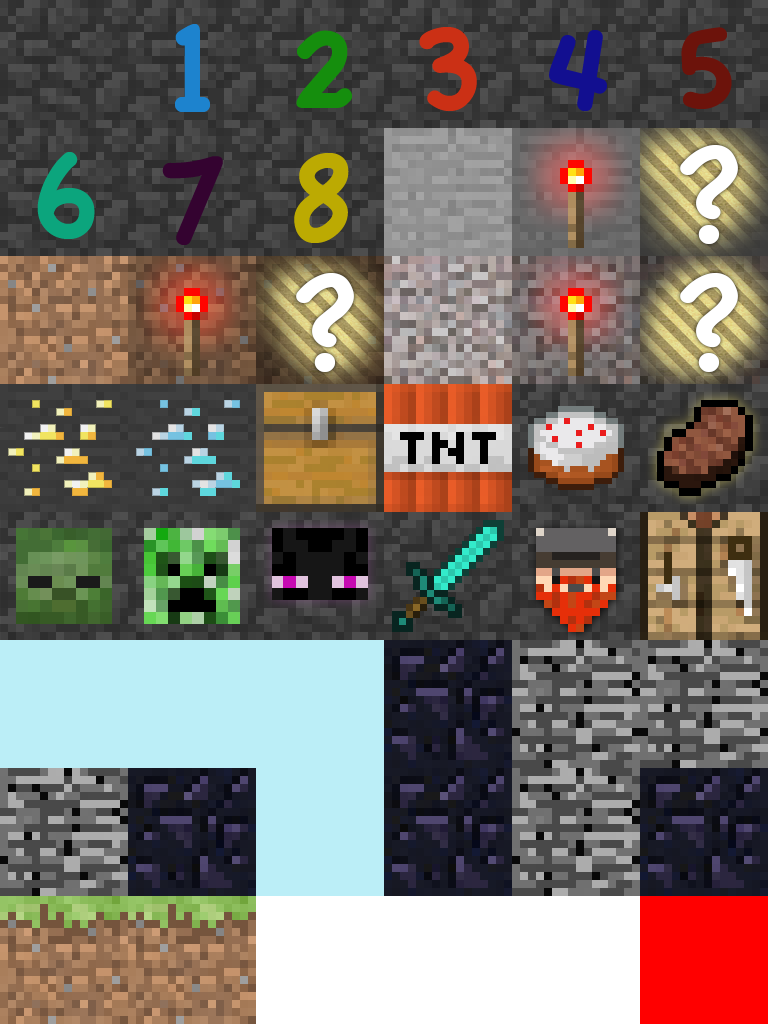
<style>
.page{position:relative;width:768px;height:1024px}
.page>*{position:absolute;margin:0}
.t1{font:130px "AppleCasual";color:#1d83ce}
.t2{font:130px "AppleCasual";color:#158e0d}
.t3{font:130px "AppleCasual";color:#cb3015}
.t4{font:130px "AppleCasual";color:#120f90}
.t5{font:130px "AppleCasual";color:#6c130b}
.t6{font:144px "ChalkboardSE-Regular";color:#ffffff}
.t7{font:130px "AppleCasual";color:#0ca57d}
.t8{font:130px "AppleCasual";color:#340330}
.t9{font:130px "AppleCasual";color:#bcaa02}
</style>
<div class="page">
<p class="t1" style="left:175px;top:24px;width:35px;height:88px">1</p>
<p class="t2" style="left:296px;top:30px;width:56px;height:78px">2</p>
<p class="t3" style="left:419px;top:27px;width:58px;height:84px">3</p>
<p class="t4" style="left:549px;top:30px;width:58px;height:81px">4</p>
<p class="t5" style="left:681px;top:27px;width:51px;height:82px">5</p>
<p class="t6" style="left:680px;top:145px;width:58px;height:99px">?</p>
<p class="t7" style="left:37px;top:152px;width:58px;height:87px">6</p>
<p class="t8" style="left:162px;top:156px;width:61px;height:89px">7</p>
<p class="t9" style="left:294px;top:153px;width:55px;height:90px">8</p>
<p class="t6" style="left:296px;top:273px;width:58px;height:99px">?</p>
<p class="t6" style="left:680px;top:273px;width:58px;height:99px">?</p>
</div>
